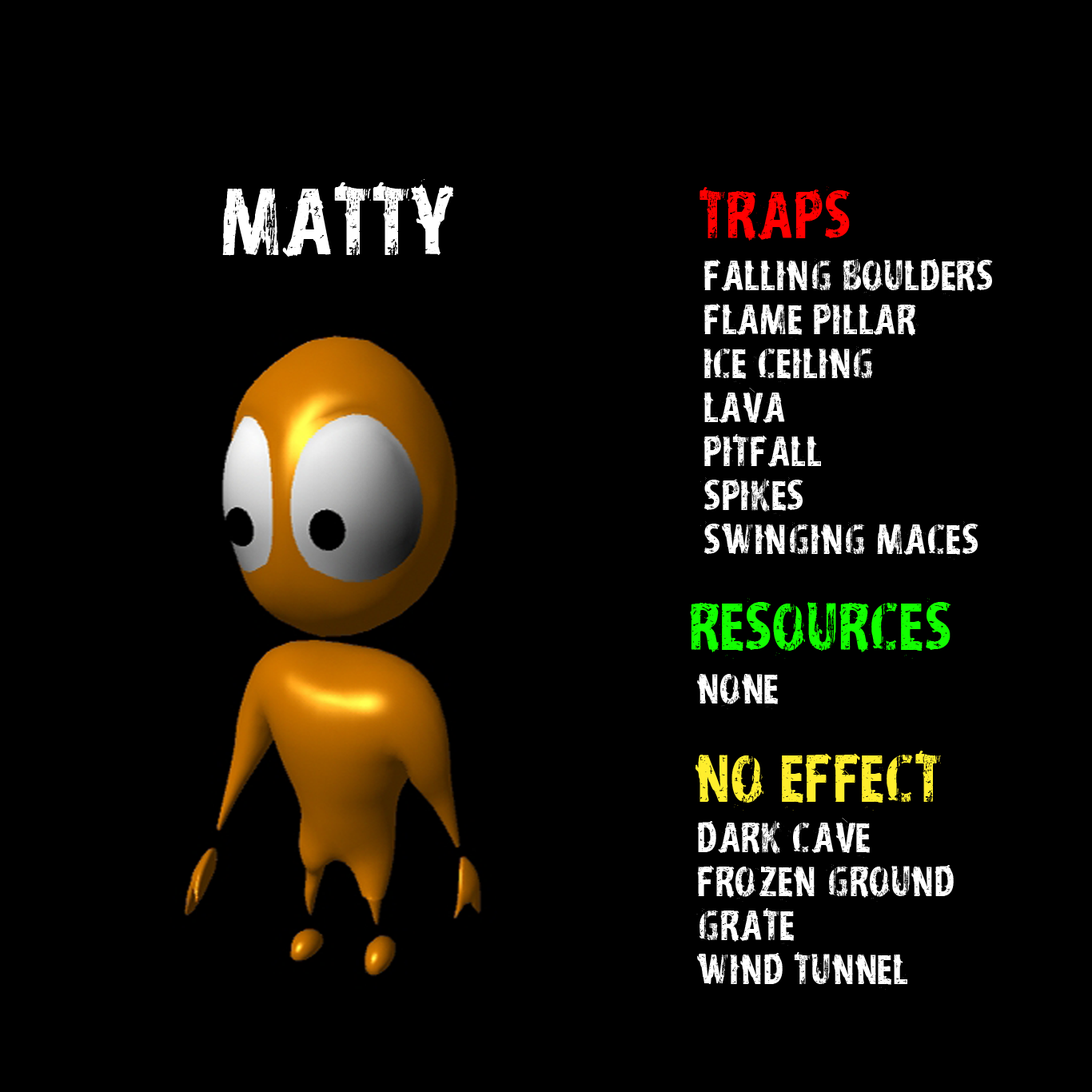
<style>
.page{position:relative;width:1092px;height:1092px;background:#000000}
.page>*{position:absolute;margin:0}
.t1{font:83.5px "vtksdistress";color:#ffffff}
.t2{font:58.4px "vtksdistress";color:#ff0000}
.t3{font:37.2px/44px "vtksdistress";color:#ffffff}
.t4{font:58.4px "vtksdistress";color:#12ff00}
.t5{font:37.2px "vtksdistress";color:#ffffff}
.t6{font:58.4px "vtksdistress";color:#ffee2d}
</style>
<div class="page">
<p class="t1" style="left:222px;top:179px;width:231px;height:78px">matty</p>
<p class="t2" style="left:699px;top:186px;width:152px;height:55px">traps</p>
<p class="t3" style="left:700px;top:257px;width:293px;height:303px">falling boulders<br>flame pillar<br>Ice Ceiling<br>Lava<br>pitfall<br>spikes<br>swinging maces</p>
<p class="t4" style="left:690px;top:598px;width:261px;height:61px">resources</p>
<p class="t5" style="left:697px;top:674px;width:81px;height:35px">None</p>
<p class="t6" style="left:695px;top:751px;width:246px;height:60px">No effect</p>
<p class="t3" style="left:696px;top:818px;width:258px;height:172px">dark cave<br>Frozen Ground<br>grate<br>Wind tunnel</p>
</div>
